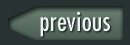
<style>
.page{position:relative;width:130px;height:45px;background:#293233}
.page>*{position:absolute;margin:0}
.t1{font:27px "Futura-CondensedMedium";color:#ebf1f0}
</style>
<div class="page">
<p class="t1" style="left:40px;top:11px;width:70px;height:26px">previous</p>
</div>
